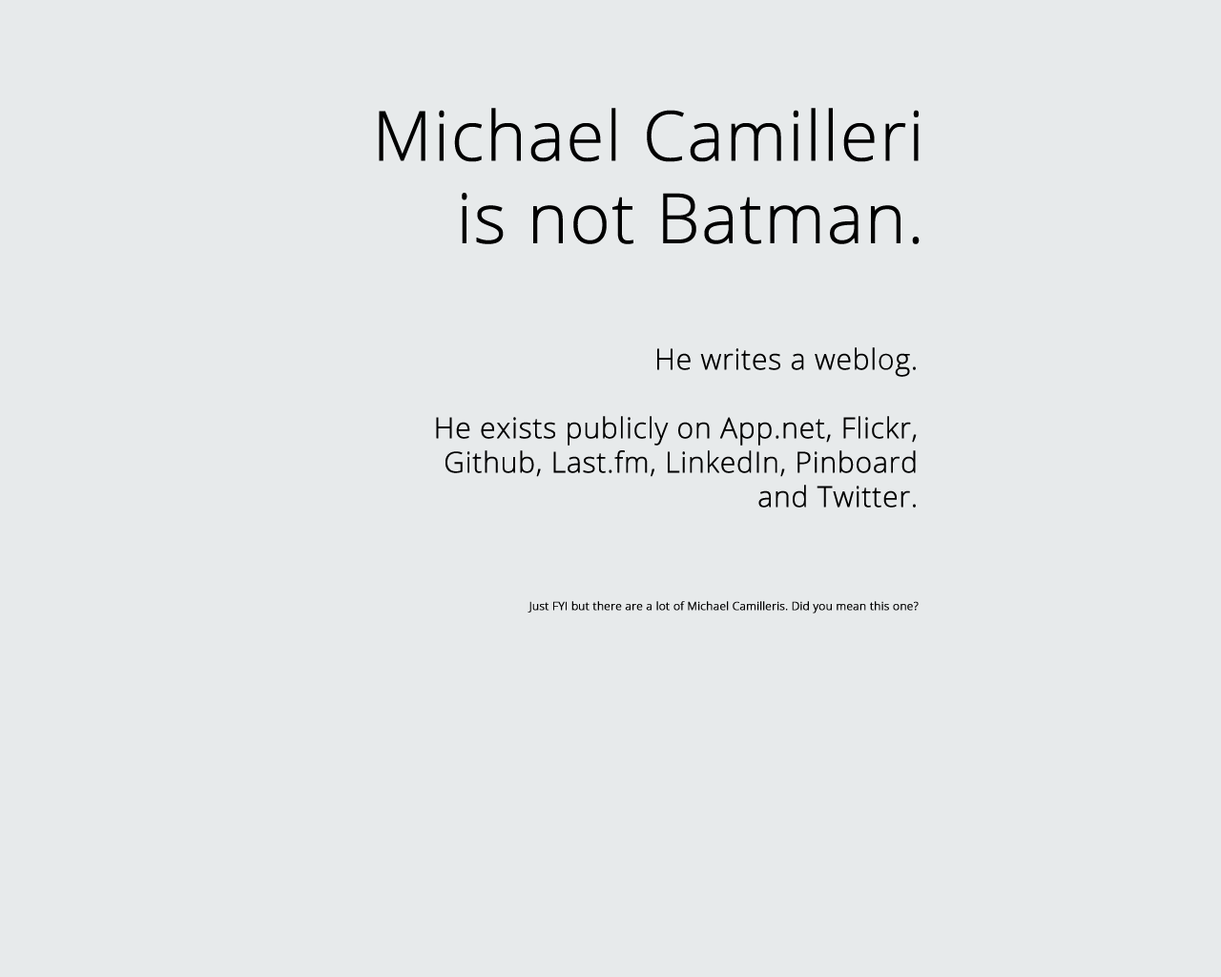
<style>
.page{position:relative;width:1221px;height:977px;background:#e7eaeb}
.page>*{position:absolute;margin:0}
.t1{font:68.7px "OpenSans-Light";color:#000000;font-weight:bold}
.t2{font:28.6px "OpenSans-Light";color:#000000;font-weight:bold}
.t3{font:11.4px "OpenSans-Light";color:#000000;font-weight:bold}
</style>
<div class="page">
<p class="t1" style="left:379px;top:108px;width:540px;height:136px;text-align:right">Michael Camilleri<br>is not Batman.</p>
<p class="t2" style="left:436px;top:347px;width:481px;height:160px;text-align:right">He writes a weblog.<br><br>He exists publicly on App.net, Flickr, Github, Last.fm, LinkedIn, Pinboard and Twitter.</p>
<p class="t3" style="left:527px;top:601px;width:392px;height:12px">Just FYI but there are a lot of Michael Camilleris. Did you mean this one?</p>
</div>
